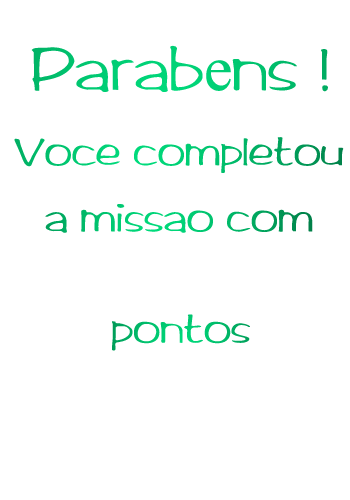
<style>
.page{position:relative;width:350px;height:500px;background:#ffffff}
.page>*{position:absolute;margin:0}
.t1{font:64px "Arctic2";color:#00ca72}
.t2{font:64px "TimesNewRomanPSMT";color:#00ca72}
.t3{font:42px "Arctic2"}
.t4{font:42px "Arctic2";color:#00c06c}
</style>
<div class="page">
<p class="t1" style="left:31px;top:45px;width:297px;height:47px">Parab<span class="t2">e</span>ns !</p>
<p class="t3" style="left:14px;top:137px;width:330px;height:36px">Voce completou</p>
<p class="t3" style="left:45px;top:204px;width:268px;height:29px">a missao com</p>
<p class="t4" style="left:112px;top:314px;width:138px;height:37px">pontos</p>
</div>
